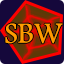
<style>
.page{position:relative;width:64px;height:64px;background:#15083b}
.page>*{position:absolute;margin:0}
.t1{font:30px "Andalus";color:#ff9b00}
</style>
<div class="page">
<p class="t1" style="left:5px;top:23px;width:58px;height:21px">SBW</p>
</div>
